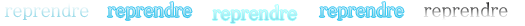
<style>
.page{position:relative;width:525px;height:26px;background:#ffffff}
.page>*{position:absolute;margin:0}
.t1{font:21px "MS-PMincho";color:#bce7f0}
.t2{font:21px "MS-PMincho"}
</style>
<div class="page">
<p class="t1" style="left:4px;top:2px;width:85px;height:18px">reprendre</p>
<p class="t1" style="left:107px;top:2px;width:85px;height:18px">reprendre</p>
<p class="t1" style="left:212px;top:5px;width:85px;height:18px">reprendre</p>
<p class="t1" style="left:319px;top:2px;width:85px;height:18px">reprendre</p>
<p class="t2" style="left:423px;top:2px;width:85px;height:18px">reprendre</p>
</div>
